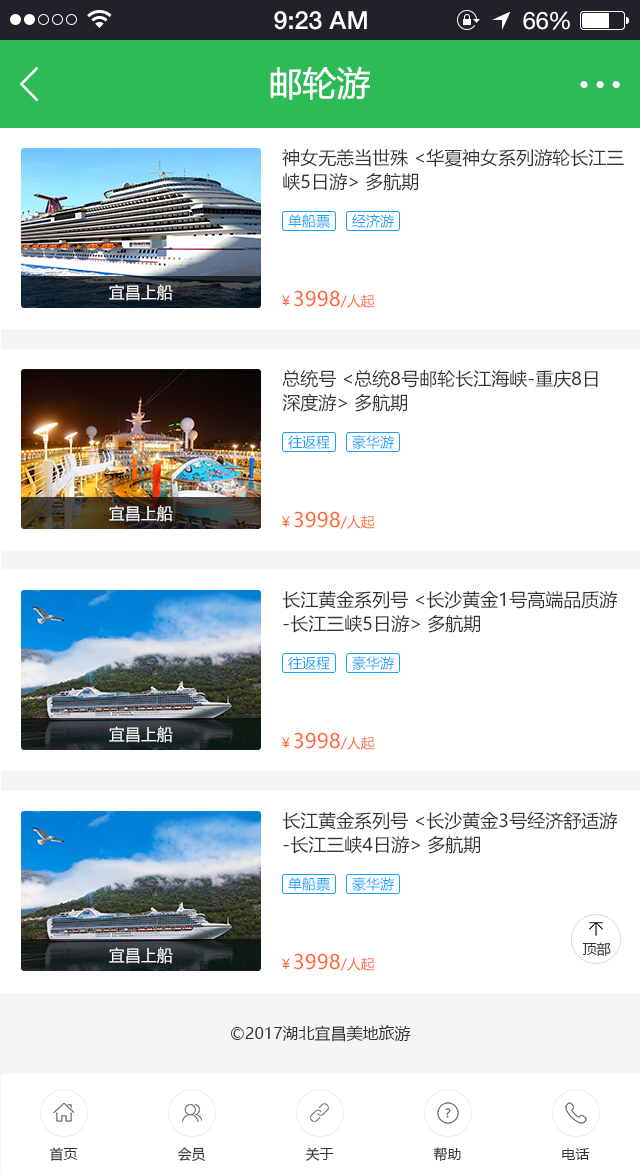
<style>
.page{position:relative;width:640px;height:1174px;background:#ffffff}
.page>*{position:absolute;margin:0}
.t1{font:25px "HelveticaNeue-Medium";color:#ffffff}
.t2{font:24px "HelveticaNeue";color:#ffffff}
.t3{font:24px "HelveticaNeue";letter-spacing:-0.02em;color:#ffffff}
.t4{font:34px "MicrosoftYaHei";color:#ffffff}
.t5{font:18px/24px "MicrosoftYaHei";color:#333333}
.t6{font:14px "MicrosoftYaHei";color:#1aa1f7}
.t7{font:16px "MicrosoftYaHei";color:#ffffff}
.t8{font:20px "MicrosoftYaHei";color:#ff6633}
.t9{font:14px "MicrosoftYaHei";color:#ff6633}
.t10{font:14px "MicrosoftYaHei";color:#333333}
.t11{font:16px "MicrosoftYaHei";color:#333333}
</style>
<div class="page">
<p class="t1" style="left:274px;top:11px;width:93px;height:19px">9:23 AM</p>
<p class="t2" style="left:523px;top:11px;width:47px;height:19px">6<span class="t3">6</span>%</p>
<p class="t4" style="left:270px;top:66px;width:100px;height:34px">邮轮游</p>
<p class="t5" style="left:282px;top:148px;width:342px;height:43px">神女无恙当世殊 &lt;华夏神女系列游轮长江三<br>峡5日游&gt; 多航期</p>
<p class="t6" style="left:288px;top:214px;width:42px;height:14px">单船票</p>
<p class="t6" style="left:352px;top:214px;width:42px;height:14px">经济游</p>
<p class="t7" style="left:109px;top:284px;width:64px;height:17px">宜昌上船</p>
<p class="t8" style="left:282px;top:290px;width:93px;height:18px"><span class="t9">￥</span>3998<span class="t9">/人起</span></p>
<p class="t5" style="left:282px;top:369px;width:316px;height:43px">总统号 &lt;总统8号邮轮长江海峡-重庆8日<br>深度游&gt; 多航期</p>
<p class="t6" style="left:288px;top:435px;width:42px;height:14px">往返程</p>
<p class="t6" style="left:352px;top:435px;width:42px;height:14px">豪华游</p>
<p class="t7" style="left:109px;top:505px;width:64px;height:17px">宜昌上船</p>
<p class="t8" style="left:282px;top:511px;width:93px;height:18px"><span class="t9">￥</span>3998<span class="t9">/人起</span></p>
<p class="t5" style="left:282px;top:591px;width:335px;height:42px">长江黄金系列号 &lt;长沙黄金1号高端品质游<br>-长江三峡5日游&gt; 多航期</p>
<p class="t6" style="left:288px;top:656px;width:42px;height:14px">往返程</p>
<p class="t6" style="left:352px;top:656px;width:42px;height:14px">豪华游</p>
<p class="t7" style="left:109px;top:726px;width:64px;height:17px">宜昌上船</p>
<p class="t8" style="left:282px;top:732px;width:93px;height:18px"><span class="t9">￥</span>3998<span class="t9">/人起</span></p>
<p class="t5" style="left:282px;top:811px;width:335px;height:43px">长江黄金系列号 &lt;长沙黄金3号经济舒适游<br>-长江三峡4日游&gt; 多航期</p>
<p class="t6" style="left:288px;top:877px;width:42px;height:14px">单船票</p>
<p class="t6" style="left:352px;top:877px;width:42px;height:14px">豪华游</p>
<p class="t10" style="left:582px;top:942px;width:29px;height:14px">顶部</p>
<p class="t7" style="left:109px;top:947px;width:64px;height:17px">宜昌上船</p>
<p class="t8" style="left:282px;top:953px;width:93px;height:18px"><span class="t9">￥</span>3998<span class="t9">/人起</span></p>
<p class="t11" style="left:231px;top:1025px;width:180px;height:17px">©2017湖北宜昌美地旅游</p>
<p class="t10" style="left:49px;top:1147px;width:29px;height:14px">首页</p>
<p class="t10" style="left:178px;top:1147px;width:27px;height:15px">会员</p>
<p class="t10" style="left:306px;top:1147px;width:28px;height:14px">关于</p>
<p class="t10" style="left:433px;top:1147px;width:28px;height:15px">帮助</p>
<p class="t10" style="left:562px;top:1148px;width:28px;height:12px">电话</p>
</div>
